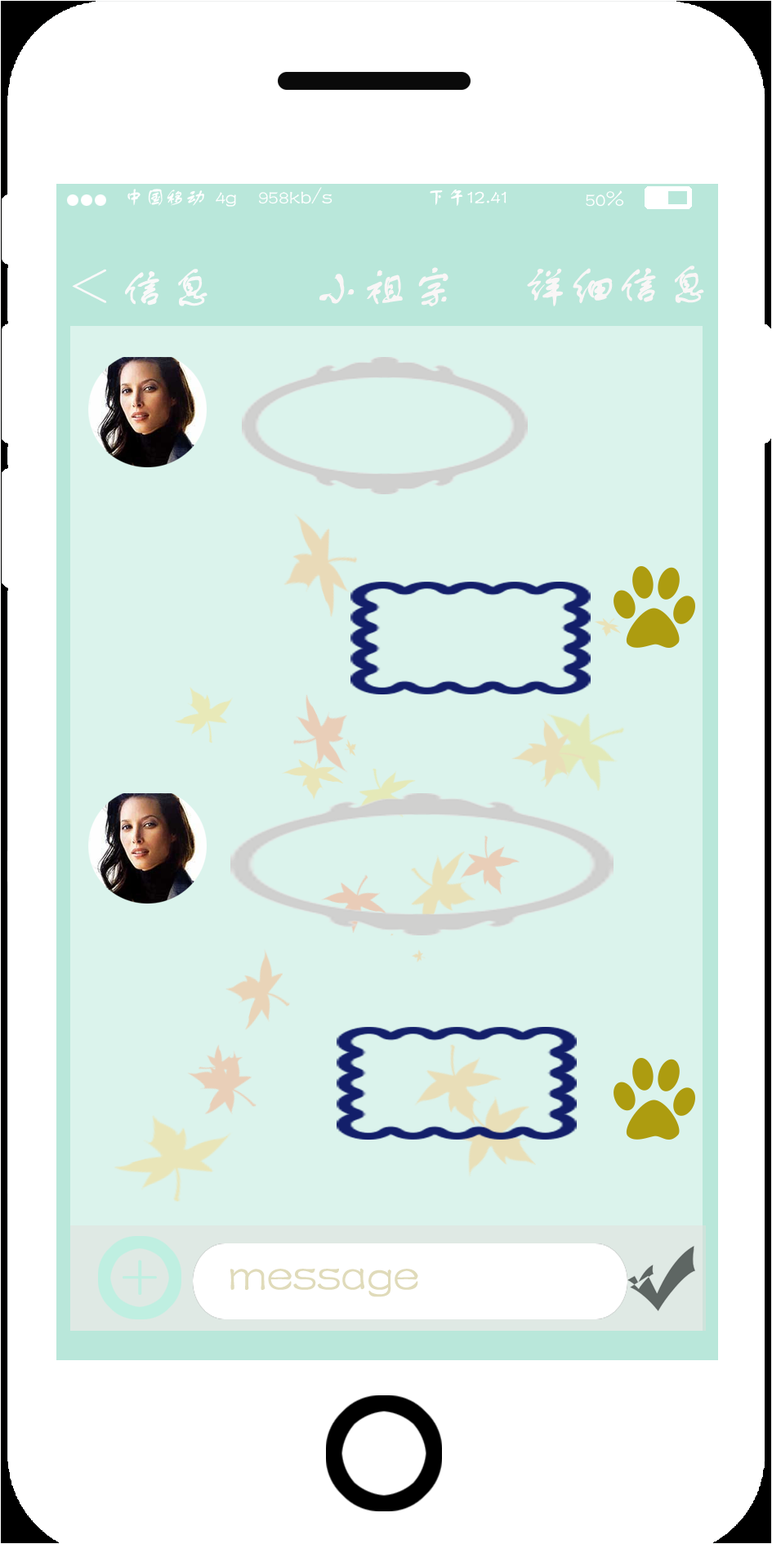
<style>
.page{position:relative;width:772px;height:1544px;background:#dbf3ec}
.page>*{position:absolute;margin:0}
.t1{font:47.7px "FZSTK--GBK1-0";color:#f9f9f9}
.t2{font:47.7px "FZSTK--GBK1-0";color:#f9f6f6}
.t3{font:59.6px "FZSTK--GBK1-0";color:#bfefe1}
.t4{font:47.7px "FZSTK--GBK1-0";color:#e0dbba}
</style>
<div class="page">
<p class="t1" style="left:72px;top:269px;width:136px;height:37px">&lt; 信息</p>
<p class="t2" style="left:319px;top:267px;width:130px;height:39px">小祖宗</p>
<p class="t2" style="left:527px;top:266px;width:177px;height:40px">详细信息</p>
<p class="t3" style="left:123px;top:1260px;width:34px;height:35px">+</p>
<p class="t4" style="left:230px;top:1268px;width:188px;height:30px">message</p>
</div>
